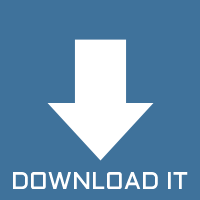
<style>
.page{position:relative;width:200px;height:200px;background:#3f729b}
.page>*{position:absolute;margin:0}
.t1{font:24px "Aldrich";color:#ffffff}
</style>
<div class="page">
<p class="t1" style="left:13px;top:172px;width:175px;height:17px">DOWNLOAD IT</p>
</div>
